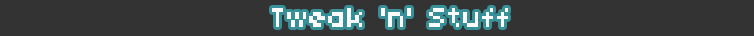
<style>
.page{position:relative;width:754px;height:36px;background:#333333}
.page>*{position:absolute;margin:0}
.t1{font:30px "04b03";color:#ffffff}
</style>
<div class="page">
<p class="t1" style="left:272px;top:8px;width:236px;height:19px">Tweak 'n' Stuff</p>
</div>
